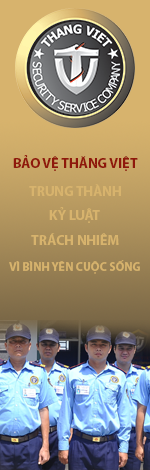
<style>
.page{position:relative;width:150px;height:470px}
.page>*{position:absolute;margin:0}
.t1{font:14px "MyriadPro-Bold";color:#8f180b}
.t2{font:14px "MyriadPro-Bold";color:#d7b36d}
.t3{font:12px "MyriadPro-Bold";color:#d7b36d}
</style>
<div class="page">
<p class="t1" style="left:13px;top:155px;width:125px;height:16px">BẢO VỆ THĂNG VIỆT</p>
<p class="t2" style="left:29px;top:184px;width:92px;height:12px">TRUNG THÀNH</p>
<p class="t2" style="left:49px;top:207px;width:51px;height:16px">KỶ LUẬT</p>
<p class="t2" style="left:31px;top:233px;width:88px;height:12px">TRÁCH NHIÊM</p>
<p class="t3" style="left:9px;top:260px;width:131px;height:14px">VÌ BÌNH YÊN CUỘC SỐNG</p>
</div>
